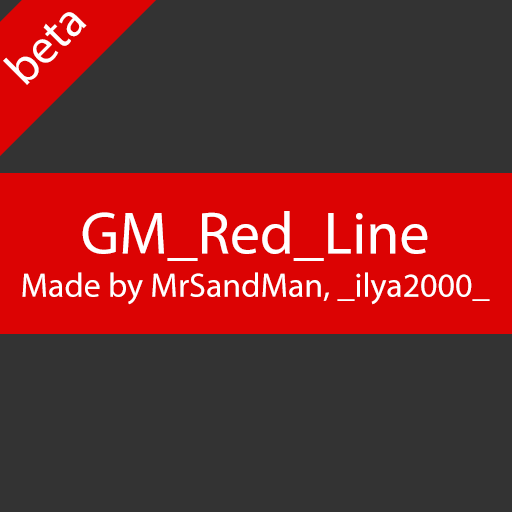
<style>
.page{position:relative;width:512px;height:512px;background:#333333}
.page>*{position:absolute;margin:0}
.t1{font:48px "MyriadPro-Regular";color:#ffffff}
.t2{font:34px "MyriadPro-Regular";color:#ffffff}
.t3{font:60px "MyriadPro-Regular";color:#ffffff}
</style>
<div class="page">
<p class="t1" style="left:3px;top:12px;width:84px;height:73px;rotate:-45deg">beta</p>
<p class="t2" style="left:22px;top:211px;width:468px;height:94px;text-align:center"><span class="t3">GM_Red_Line<br></span>Made by MrSandMan, _ilya2000_</p>
</div>
